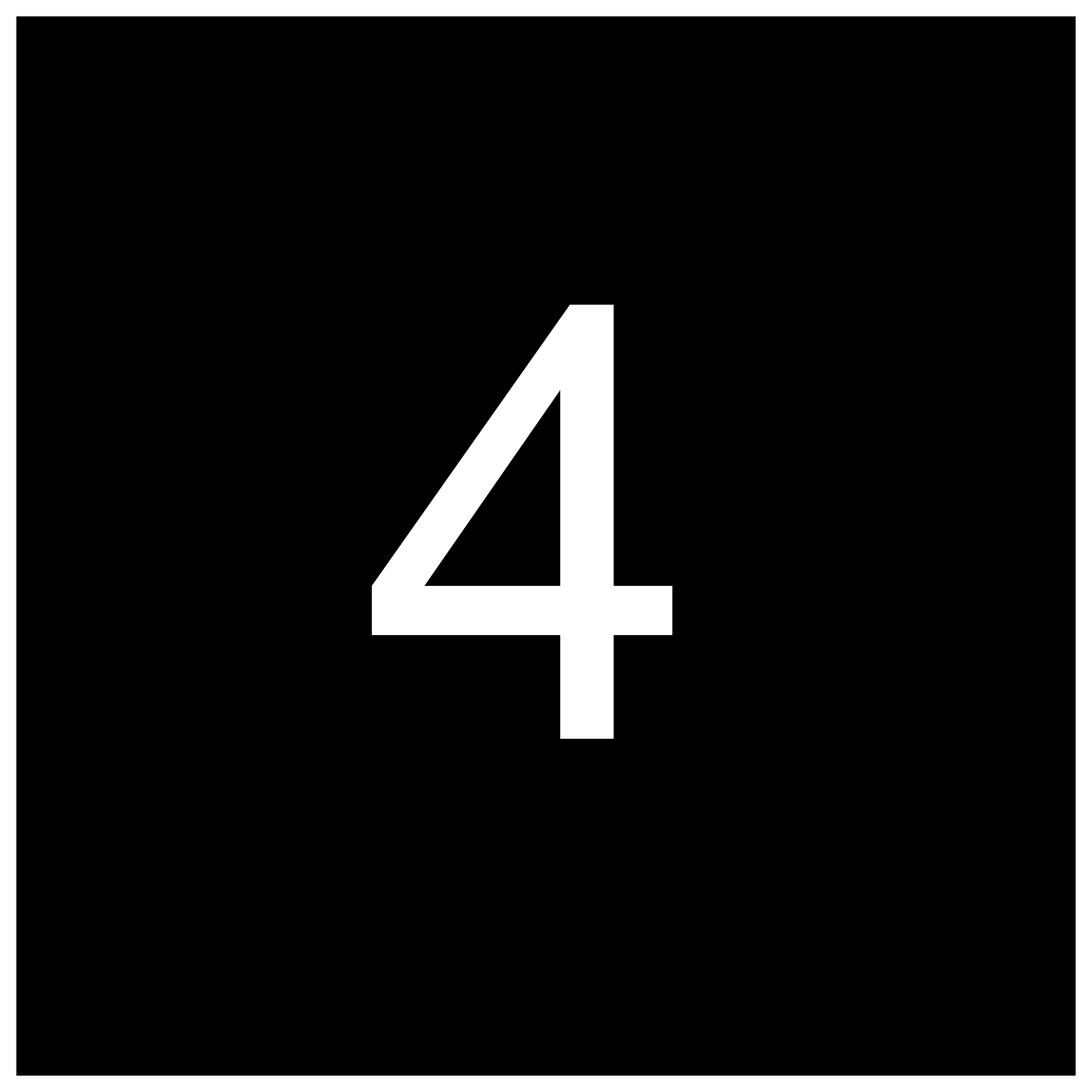
<style>
.page{position:relative;width:1092px;height:1092px;background:#000000}
.page>*{position:absolute;margin:0}
.t1{font:606.7px "ArialMT";color:#ffffff}
</style>
<div class="page">
<p class="t1" style="left:372px;top:305px;width:301px;height:434px">4</p>
</div>
